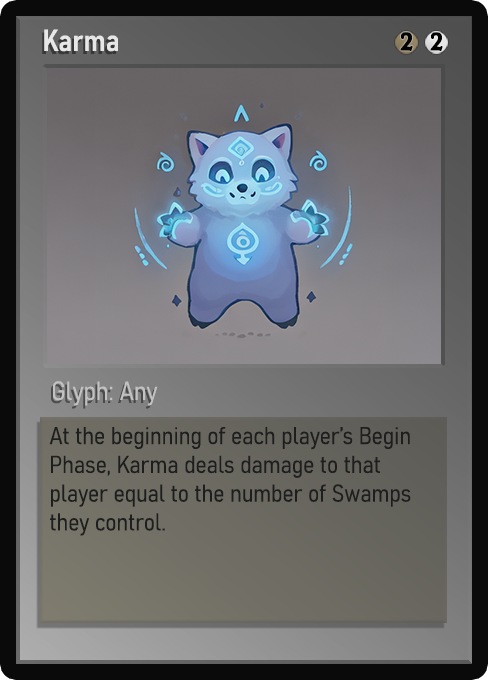
<style>
.page{position:relative;width:488px;height:680px}
.page>*{position:absolute;margin:0}
.t1{font:30px "Bahnschrift-SemiBoldSemiCondensed";color:#f2f2f2;font-weight:bold}
.t2{font:25px "WTRRoycroft";color:#000000;font-weight:bold;scale:1.09 1}
.t3{font:26px "Bahnschrift-LightSemiCondensed";color:#c8c8c8;font-weight:bold}
.t4{font:24px "Bahnschrift-LightSemiCondensed";color:#1e1e1e;font-weight:bold}
</style>
<div class="page">
<p class="t1" style="left:44px;top:29px;width:74px;height:23px;opacity:0.9">Karma</p>
<p class="t2" style="left:400px;top:32px;width:13px;height:19px">2</p>
<p class="t2" style="left:430px;top:32px;width:13px;height:19px">2</p>
<p class="t3" style="left:53px;top:381px;width:105px;height:25px;opacity:0.9">Glyph: Any</p>
<p class="t4" style="left:49px;top:427px;width:362px;height:109px">At the beginning of each player’s Begin Phase, Karma deals damage to that player equal to the number of Swamps they control.</p>
</div>
